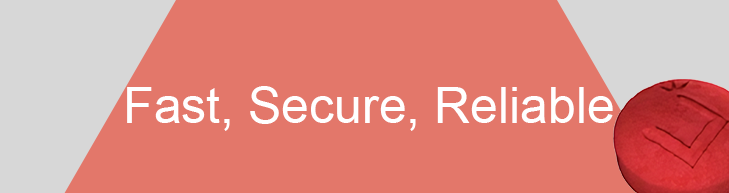
<style>
.page{position:relative;width:729px;height:193px;background:#e3776a}
.page>*{position:absolute;margin:0}
.t1{font:50px "ArialMT";color:#ffffff}
</style>
<div class="page">
<p class="t1" style="left:127px;top:86px;width:486px;height:45px">Fast, Secure, Reliable</p>
</div>
